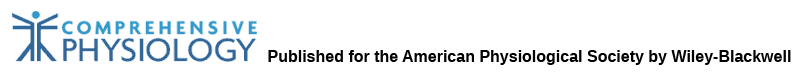
<style>
.page{position:relative;width:800px;height:73px;background:#ffffff}
.page>*{position:absolute;margin:0}
.t1{font:16px "LiberationSans-Bold";color:#000000}
</style>
<div class="page">
<p class="t1" style="left:268px;top:50px;width:523px;height:15px">Published for the American Physiological Society by Wiley-Blackwell</p>
</div>
